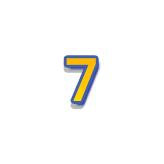
<style>
.page{position:relative;width:164px;height:164px;background:#ffffff}
.page>*{position:absolute;margin:0}
.t1{font:59.8px "PingFangHK-Semibold";color:#ffbf00;text-transform:uppercase}
</style>
<div class="page">
<p class="t1" style="left:66px;top:58px;width:30px;height:43px">7</p>
</div>
